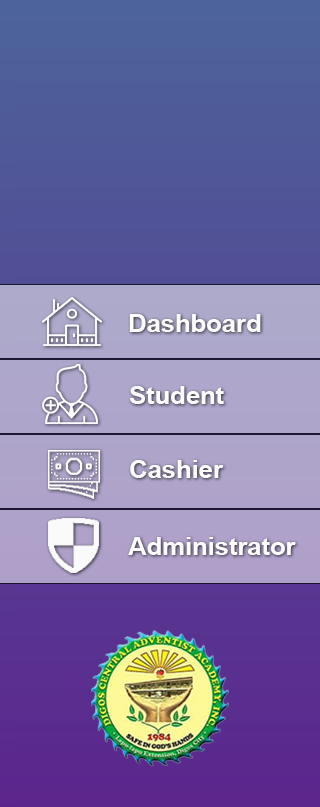
<style>
.page{position:relative;width:320px;height:807px}
.page>*{position:absolute;margin:0}
.t1{font:25.4px "Arial-BoldMT";color:#fefdfd}
</style>
<div class="page">
<p class="t1" style="left:129px;top:314px;width:132px;height:18px">Dashboard</p>
<p class="t1" style="left:129px;top:386px;width:95px;height:18px">Student</p>
<p class="t1" style="left:130px;top:460px;width:94px;height:18px">Cashier</p>
<p class="t1" style="left:128px;top:537px;width:168px;height:18px">Administrator</p>
</div>
